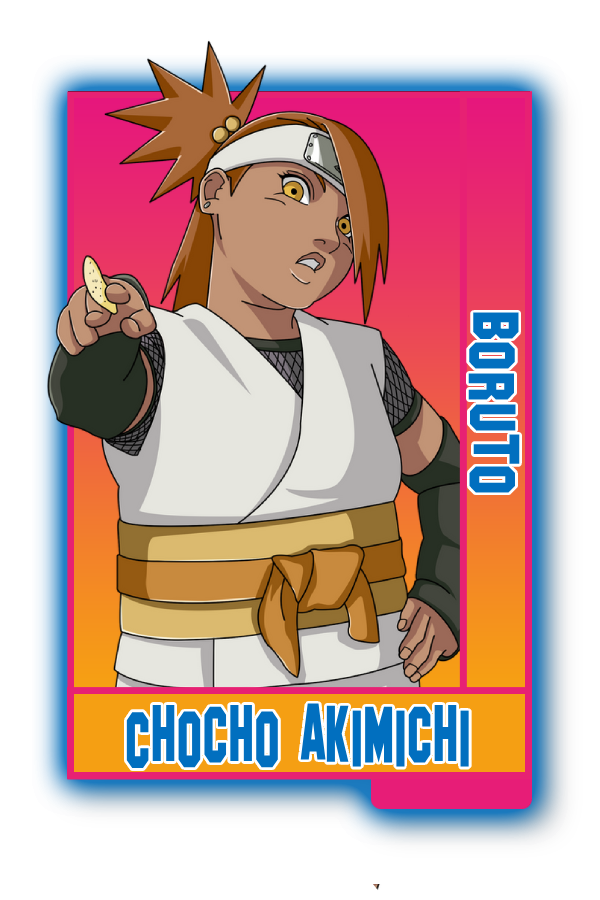
<style>
.page{position:relative;width:600px;height:900px;background:#ffffff}
.page>*{position:absolute;margin:0}
.t1{font:64.7px "SFHollywoodHills";color:#016fbf}
.t2{font:80px "SFHollywoodHills";color:#016fbf;scale:0.67 1}
</style>
<div class="page">
<p class="t1" style="left:468px;top:312px;width:52px;height:181px;rotate:90deg">Boruto</p>
<p class="t2" style="left:126px;top:703px;width:343px;height:66px">Chocho Akimichi</p>
</div>
